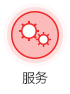
<style>
.page{position:relative;width:70px;height:94px;background:#ffffff}
.page>*{position:absolute;margin:0}
.t1{font:13px "MicrosoftYaHei";color:#323232}
</style>
<div class="page">
<p class="t1" style="left:22px;top:71px;width:26px;height:13px">服务</p>
</div>
